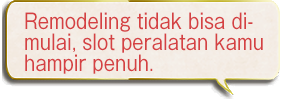
<style>
.page{position:relative;width:285px;height:100px}
.page>*{position:absolute;margin:0}
.t1{font:20.9px/21px "GothicMB101Pro-Regular";color:#d54143;scale:0.86 1}
</style>
<div class="page">
<p class="t1" style="left:25px;top:12px;width:238px;height:62px">Remodeling tidak bisa di-<br>mulai, slot peralatan kamu<br>hampir penuh.</p>
</div>
